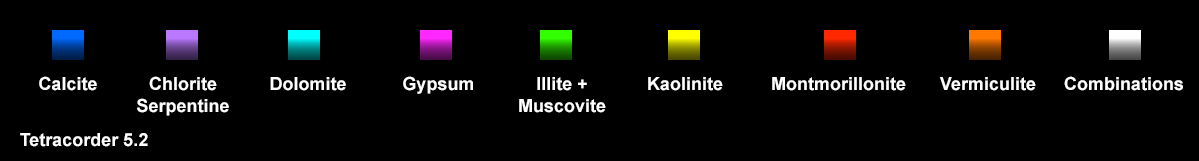
<style>
.page{position:relative;width:1199px;height:161px;background:#000000}
.page>*{position:absolute;margin:0}
.t1{font:18px "Arial-BoldMT";color:#fffefe}
</style>
<div class="page">
<p class="t1" style="left:39px;top:76px;width:58px;height:15px">Calcite</p>
<p class="t1" style="left:137px;top:76px;width:92px;height:40px;text-align:center">Chlorite<br>Serpentine</p>
<p class="t1" style="left:270px;top:77px;width:76px;height:14px">Dolomite</p>
<p class="t1" style="left:403px;top:76px;width:70px;height:18px">Gypsum</p>
<p class="t1" style="left:519px;top:77px;width:87px;height:36px;text-align:center">Illite +<br>Muscovite</p>
<p class="t1" style="left:648px;top:77px;width:75px;height:14px">Kaolinite</p>
<p class="t1" style="left:772px;top:77px;width:134px;height:14px">Montmorillonite</p>
<p class="t1" style="left:940px;top:77px;width:96px;height:14px">Vermiculite</p>
<p class="t1" style="left:1064px;top:76px;width:119px;height:15px">Combinations</p>
<p class="t1" style="left:20px;top:133px;width:128px;height:14px">Tetracorder 5.2</p>
</div>
